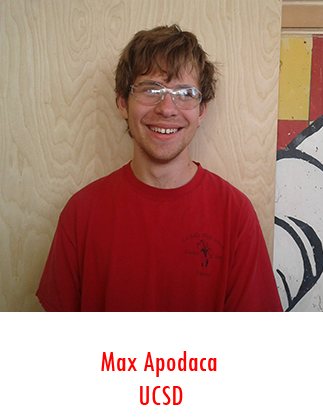
<style>
.page{position:relative;width:323px;height:420px;background:#ffffff}
.page>*{position:absolute;margin:0}
.t1{font:30px "TwCenMT-Condensed";color:#ff0000}
</style>
<div class="page">
<p class="t1" style="left:101px;top:351px;width:116px;height:26px">Max Apodaca</p>
<p class="t1" style="left:140px;top:386px;width:43px;height:19px">UCSD</p>
</div>
